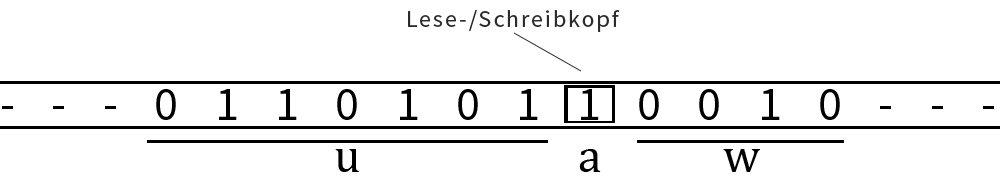
<style>
.page{position:relative;width:1000px;height:184px;background:#ffffff}
.page>*{position:absolute;margin:0}
.t1{font:24px "SourceSansPro-Regular";letter-spacing:0.08em;color:#2b2b2b}
.t2{font:48px "SourceSansPro-Regular";letter-spacing:0.76em;color:#000000}
.t3{font:48px "CambriaMath";letter-spacing:0.08em;color:#000000}
</style>
<div class="page">
<p class="t1" style="left:408px;top:9px;width:212px;height:23px">Lese-/Schreibkopf</p>
<p class="t2" style="left:2px;top:89px;width:992px;height:31px">---011010110010---</p>
<p class="t3" style="left:335px;top:149px;width:24px;height:23px">u</p>
<p class="t3" style="left:579px;top:149px;width:22px;height:23px">a</p>
<p class="t3" style="left:723px;top:149px;width:37px;height:23px">w</p>
</div>
